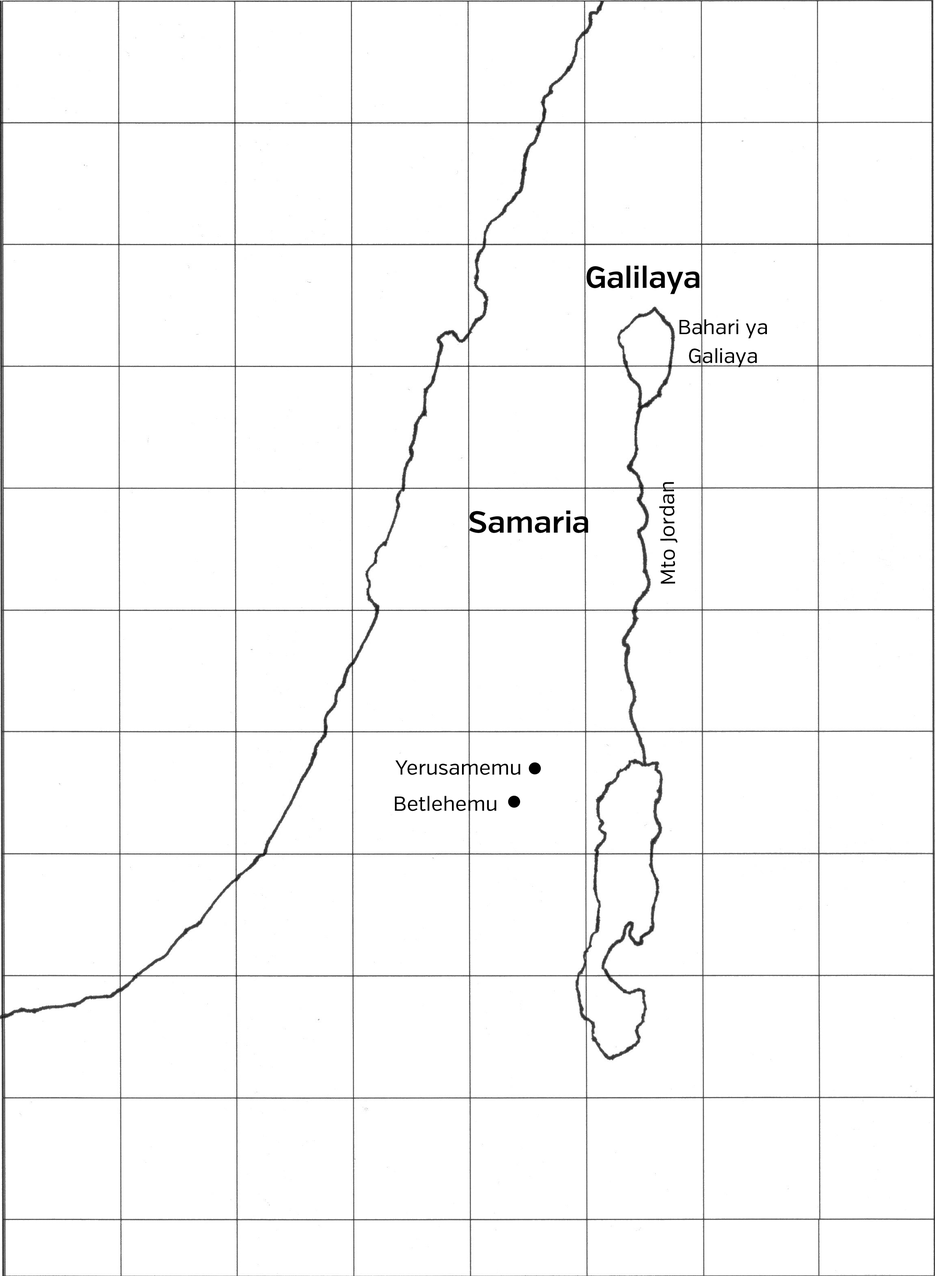
<style>
.page{position:relative;width:935px;height:1276px;background:#ffffff}
.page>*{position:absolute;margin:0}
.t1{font:30.4px "VerbSemibold";color:#000000}
.t2{font:20.3px/28.7px "VerbRegular";color:#000000}
.t3{font:20.3px "VerbRegular";color:#000000}
</style>
<div class="page">
<p class="t1" style="left:586px;top:265px;width:113px;height:29px">Galilaya</p>
<p class="t2" style="left:679px;top:319px;width:88px;height:48px;text-align:center">Bahari ya<br>Galiaya</p>
<p class="t3" style="left:659px;top:482px;width:18px;height:102px;rotate:-91deg">Mto Jordan</p>
<p class="t1" style="left:469px;top:510px;width:119px;height:23px">Samaria</p>
<p class="t3" style="left:395px;top:760px;width:125px;height:15px">Yerusamemu</p>
<p class="t3" style="left:395px;top:796px;width:101px;height:15px">Betlehemu</p>
</div>
